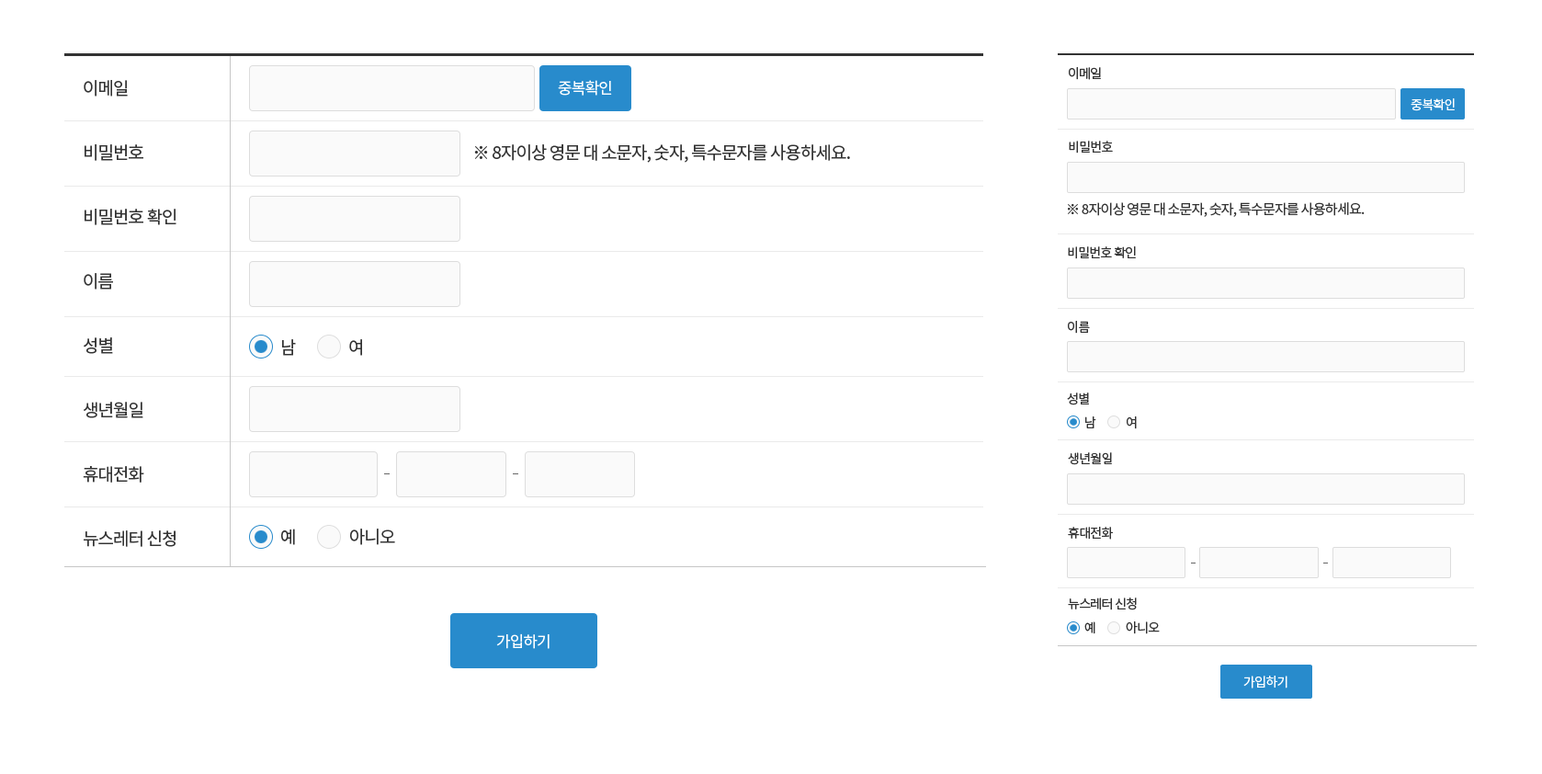
<style>
.page{position:relative;width:1542px;height:774px;background:#ffffff}
.page>*{position:absolute;margin:0}
.t1{font:12.9px/73.5px "NotoSansKR-Regular";letter-spacing:-0.05em;color:#333333;text-transform:uppercase}
.t2{font:17.5px/64.3px "NotoSansKR-Regular";letter-spacing:-0.05em;color:#333333;text-transform:uppercase}
.t3{font:15.6px "NotoSansKR-Regular";letter-spacing:-0.05em;color:#ffffff;text-transform:uppercase}
.t4{font:12.9px "NotoSansKR-Regular";letter-spacing:-0.05em;color:#ffffff;text-transform:uppercase}
.t5{font:17.5px "NotoSansKR-Regular";letter-spacing:-0.05em;color:#333333;text-transform:uppercase}
.t6{font:13.8px "NotoSansKR-Regular";letter-spacing:-0.05em;color:#333333;text-transform:uppercase}
.t7{font:12.9px "NotoSansKR-Regular";letter-spacing:-0.05em;color:#333333;text-transform:uppercase}
</style>
<div class="page">
<p class="t1" style="left:1068px;top:67px;width:45px;height:86px">이메일<br>비밀번호</p>
<p class="t2" style="left:83px;top:80px;width:93px;height:467px">이메일<br>비밀번호<br>비밀번호 확인<br>이름<br>성별<br>생년월일<br>휴대전화<br>뉴스레터 신청</p>
<p class="t3" style="left:558px;top:80px;width:54px;height:16px">중복확인</p>
<p class="t4" style="left:1410px;top:98px;width:44px;height:13px">중복확인</p>
<p class="t5" style="left:474px;top:144px;width:376px;height:19px">※ 8자이상 영문 대 소문자, 숫자, 특수문자를 사용하세요.</p>
<p class="t6" style="left:1068px;top:202px;width:296px;height:15px">※ 8자이상 영문 대 소문자, 숫자, 특수문자를 사용하세요.</p>
<p class="t7" style="left:1068px;top:246px;width:67px;height:13px">비밀번호 확인</p>
<p class="t7" style="left:1068px;top:321px;width:22px;height:12px">이름</p>
<p class="t5" style="left:282px;top:339px;width:14px;height:17px">남</p>
<p class="t5" style="left:349px;top:339px;width:13px;height:17px">여</p>
<p class="t7" style="left:1067px;top:392px;width:22px;height:13px">성별</p>
<p class="t7" style="left:1085px;top:416px;width:11px;height:12px">남</p>
<p class="t7" style="left:1126px;top:416px;width:10px;height:13px">여</p>
<p class="t7" style="left:1068px;top:452px;width:44px;height:13px">생년월일</p>
<p class="t5" style="left:281px;top:528px;width:14px;height:17px">예</p>
<p class="t5" style="left:350px;top:528px;width:45px;height:17px">아니오</p>
<p class="t7" style="left:1068px;top:526px;width:45px;height:13px">휴대전화</p>
<p class="t7" style="left:1068px;top:597px;width:68px;height:13px">뉴스레터 신청</p>
<p class="t7" style="left:1084px;top:621px;width:11px;height:13px">예</p>
<p class="t7" style="left:1125px;top:621px;width:34px;height:13px">아니오</p>
<p class="t3" style="left:496px;top:633px;width:53px;height:16px">가입하기</p>
<p class="t4" style="left:1243px;top:675px;width:44px;height:13px">가입하기</p>
</div>
